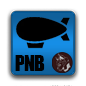
<style>
.page{position:relative;width:86px;height:86px;background:#ffffff}
.page>*{position:absolute;margin:0}
.t1{font:20.3px "Impact";letter-spacing:-0.05em;color:#000000}
</style>
<div class="page">
<p class="t1" style="left:15px;top:55px;width:30px;height:16px">PNB</p>
</div>
